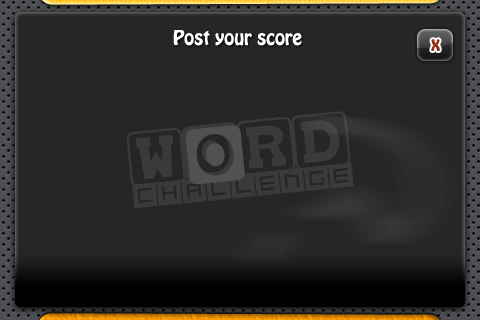
<style>
.page{position:relative;width:480px;height:320px;background:#262626}
.page>*{position:absolute;margin:0}
.t1{font:18px "HoboStd";color:#ffffff}
.t2{font:18px "HoboStd";color:#952f14}
.t3{font:46px "babybloc";color:#3a3a3a}
.t4{font:46px "babybloc";color:#515151}
.t5{font:36px "Qubix";color:#3a3a3a}
</style>
<div class="page">
<p class="t1" style="left:173px;top:30px;width:129px;height:16px">Post your score</p>
<p class="t2" style="left:431px;top:39px;width:9px;height:12px">x</p>
<p class="t3" style="left:126px;top:111px;width:225px;height:76px;rotate:-6deg">WoRD</p>
<p class="t4" style="left:185px;top:125px;width:60px;height:60px;rotate:-6deg">o</p>
<p class="t5" style="left:132px;top:163px;width:222px;height:46px;rotate:-6deg">Challenge</p>
</div>
